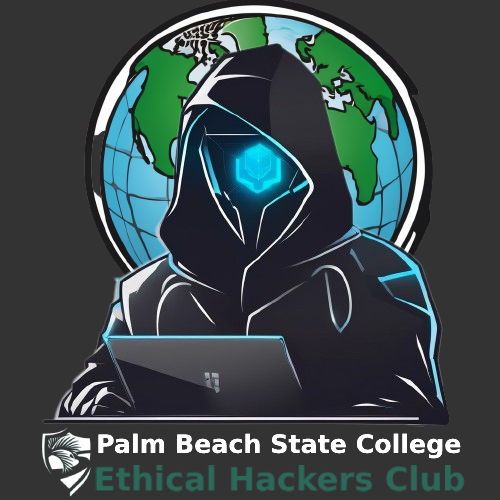
<style>
.page{position:relative;width:500px;height:500px;background:#333333}
.page>*{position:absolute;margin:0}
.t1{font:25.3px "DejaVuSans-Bold";color:#ffffff}
</style>
<div class="page">
<p class="t1" style="left:98px;top:433px;width:363px;height:26px">Palm Beach State College</p>
</div>
